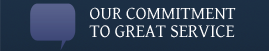
<style>
.page{position:relative;width:269px;height:51px}
.page>*{position:absolute;margin:0}
.t1{font:18.4px/18px "GentiumBasic";color:#ffffff}
.t2{font:18px/18px "GentiumBasic";color:#ffffff}
</style>
<div class="page">
<p class="t1" style="left:89px;top:7px;width:147px;height:31px"><span class="t2">OUR COMMITMENT<br></span>TO GREAT SERVICE</p>
</div>
